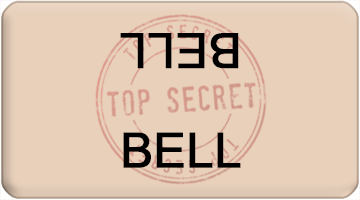
<style>
.page{position:relative;width:360px;height:200px;background:#e8d0bb}
.page>*{position:absolute;margin:0}
.t1{font:48px "ArialMT";color:#000000;font-weight:bold}
</style>
<div class="page">
<p class="t1" style="left:120px;top:33px;width:119px;height:36px;rotate:180deg">BELL</p>
<p class="t1" style="left:123px;top:132px;width:118px;height:36px">BELL</p>
</div>
